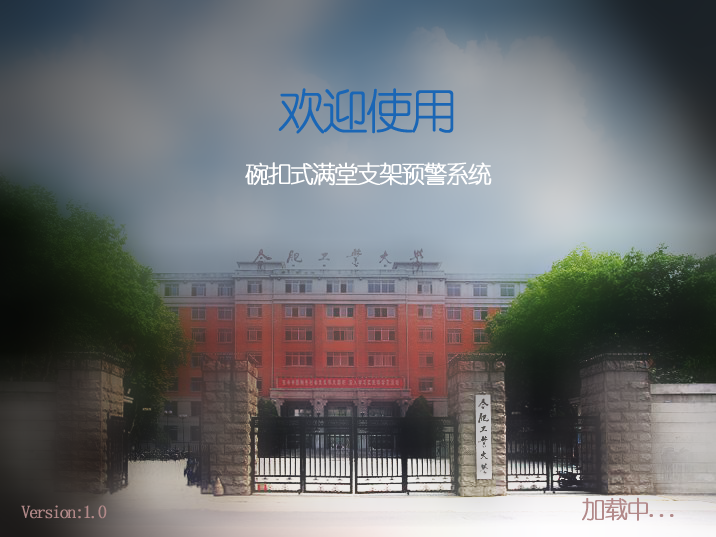
<style>
.page{position:relative;width:716px;height:537px}
.page>*{position:absolute;margin:0}
.t1{font:48px "YouYuan";letter-spacing:-0.1em;color:#1a66b5;font-weight:bold}
.t2{font:24px "YouYuan";letter-spacing:-0.1em;color:#ffffff;font-weight:bold}
.t3{font:24px "YouYuan";letter-spacing:-0.1em;color:#b28989;font-weight:bold}
.t4{font:18px "YouYuan";letter-spacing:-0.1em;color:#b28989;font-weight:bold}
</style>
<div class="page">
<p class="t1" style="left:278px;top:88px;width:176px;height:46px">欢迎使用</p>
<p class="t2" style="left:245px;top:162px;width:247px;height:24px">碗扣式满堂支架预警系统</p>
<p class="t3" style="left:582px;top:497px;width:92px;height:24px">加载中...</p>
<p class="t4" style="left:21px;top:505px;width:86px;height:14px">Version:1.0</p>
</div>
